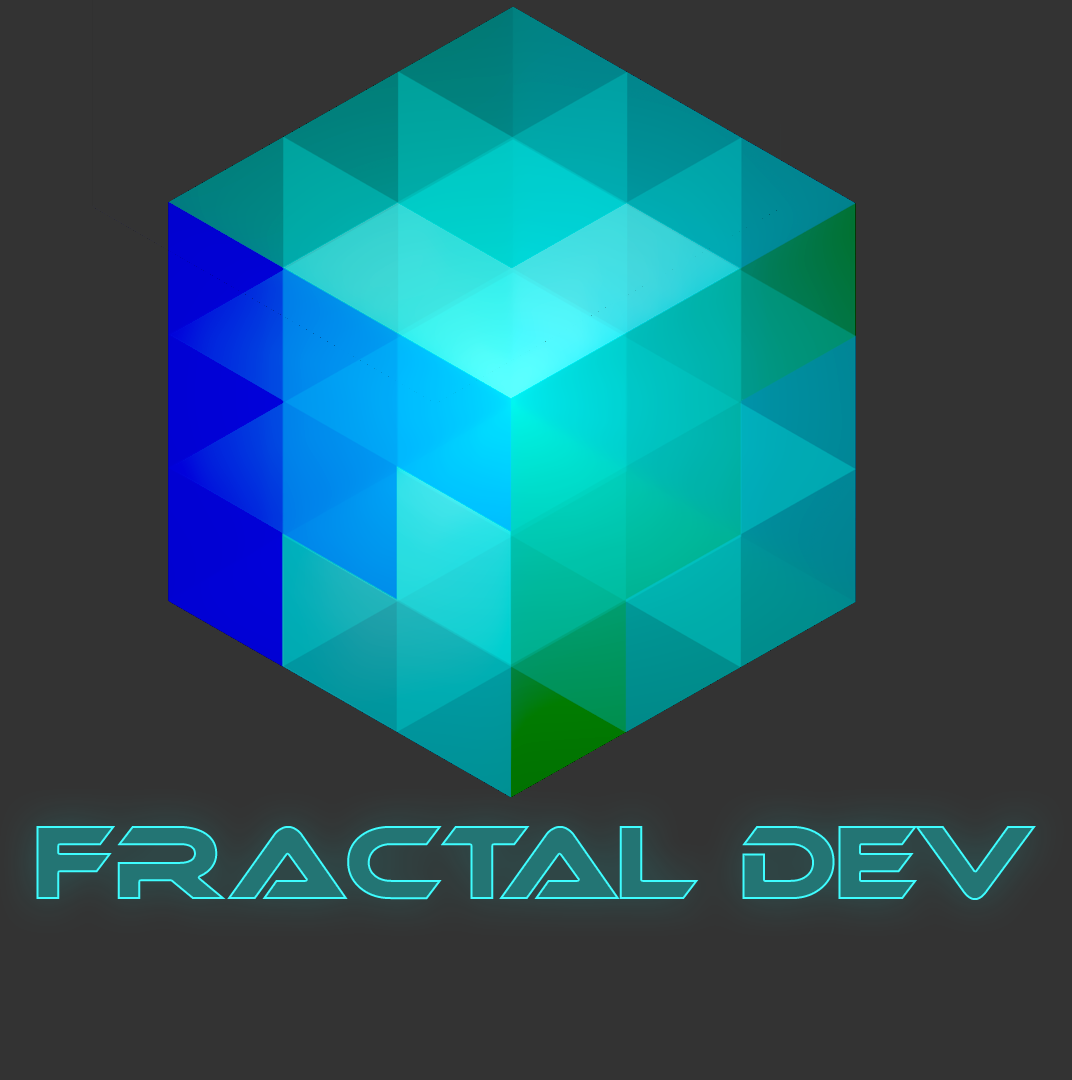
<style>
.page{position:relative;width:1072px;height:1080px;background:#333333}
.page>*{position:absolute;margin:0}
.t1{font:100px "Ethnocentric";color:#237574}
</style>
<div class="page">
<p class="t1" style="left:36px;top:826px;width:1000px;height:74px">Fractal Dev</p>
</div>
